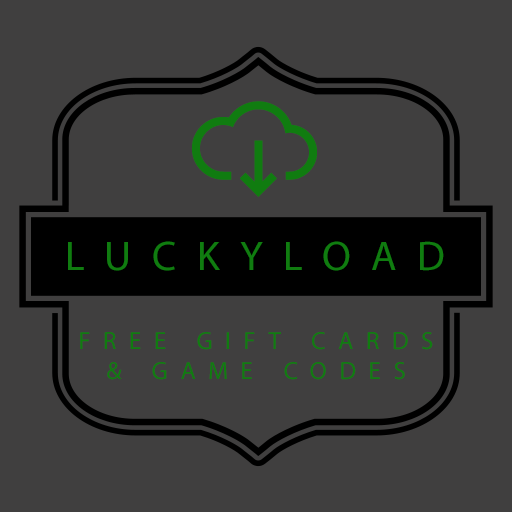
<style>
.page{position:relative;width:512px;height:512px;background:#403f3f}
.page>*{position:absolute;margin:0}
.t1{font:41.7px "MyriadPro-Regular";letter-spacing:0.5em;color:#107c10}
.t2{font:25px "MyriadPro-Regular";letter-spacing:0.5em;color:#107c10}
</style>
<div class="page">
<p class="t1" style="left:68px;top:241px;width:376px;height:30px">LUCKYLOAD</p>
<p class="t2" style="left:80px;top:332px;width:353px;height:48px;text-align:center">FREE GIFT CARDS<br>&amp; GAME CODES</p>
</div>
